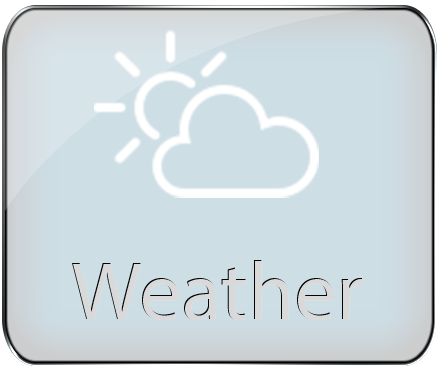
<style>
.page{position:relative;width:440px;height:369px;background:#cddee5}
.page>*{position:absolute;margin:0}
.t1{font:83.2px "MyriadPro-Regular";color:#d9d9d9}
</style>
<div class="page">
<p class="t1" style="left:72px;top:260px;width:290px;height:60px">Weather</p>
</div>
